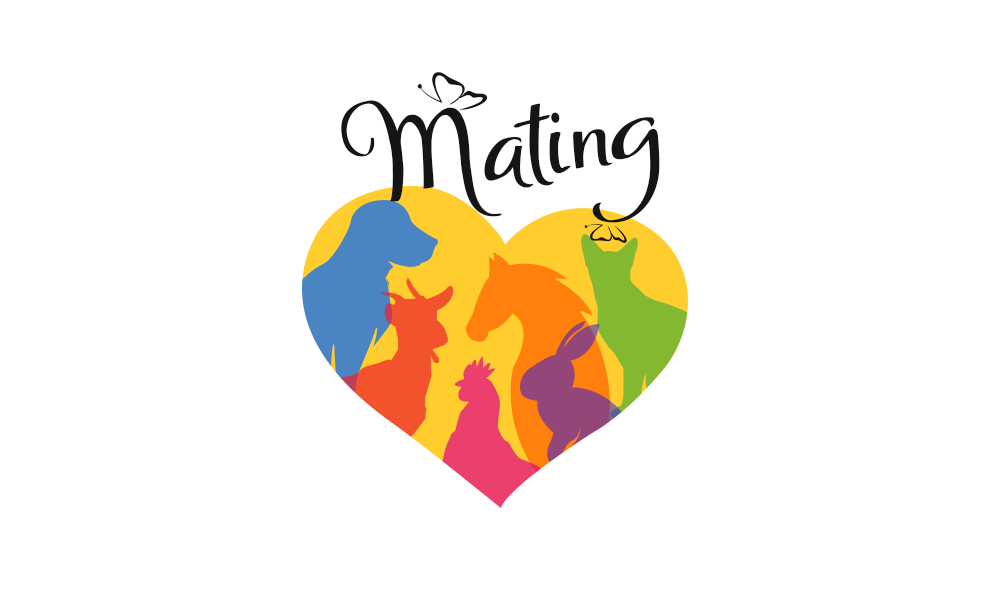
<style>
.page{position:relative;width:1000px;height:600px;background:#ffffff}
.page>*{position:absolute;margin:0}
.t1{font:183px "Sofye-Demo";color:#151515}
</style>
<div class="page">
<p class="t1" style="left:341px;top:72px;width:319px;height:171px;rotate:-9deg">Mating</p>
</div>
